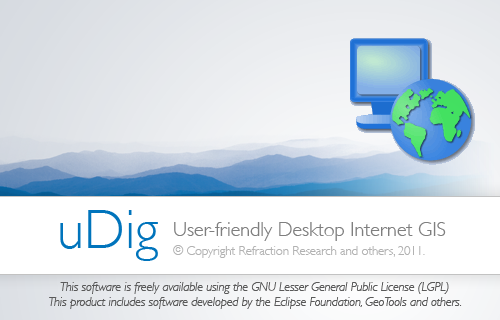
<style>
.page{position:relative;width:500px;height:320px;background:#ffffff}
.page>*{position:absolute;margin:0}
.t1{font:55px "GillSans-Light";color:#0074bc}
.t2{font:20px "GillSans-Light";color:#7f7f7f}
.t3{font:12.5px "GillSans-Light";color:#b2b2b2}
.t4{font:12.5px "GillSans-LightItalic";color:#595959}
</style>
<div class="page">
<p class="t1" style="left:60px;top:210px;width:98px;height:51px">uDig</p>
<p class="t2" style="left:174px;top:222px;width:272px;height:19px">User-friendly Desktop Internet GIS</p>
<p class="t3" style="left:173px;top:245px;width:252px;height:13px">© Copyright Refraction Research and others, 2011.</p>
<p class="t4" style="left:49px;top:282px;width:413px;height:27px;text-align:center">This software is freely available using the GNU Lesser General Public License (LGPL)<br>This product includes software developed by the Eclipse Foundation, GeoTools and others.</p>
</div>
